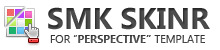
<style>
.page{position:relative;width:220px;height:50px;background:#ffffff}
.page>*{position:absolute;margin:0}
.t1{font:30px "Ebrima-Bold";color:#414141;text-transform:uppercase}
.t2{font:11px "Ebrima-Bold";color:#414141;text-transform:uppercase}
.t3{font:11px "Ebrima";color:#414141;text-transform:uppercase}
</style>
<div class="page">
<p class="t1" style="left:48px;top:7px;width:162px;height:23px">SMK Skinr</p>
<p class="t2" style="left:50px;top:35px;width:155px;height:8px"><span class="t3">for “</span>Perspective” <span class="t3">template</span></p>
</div>
